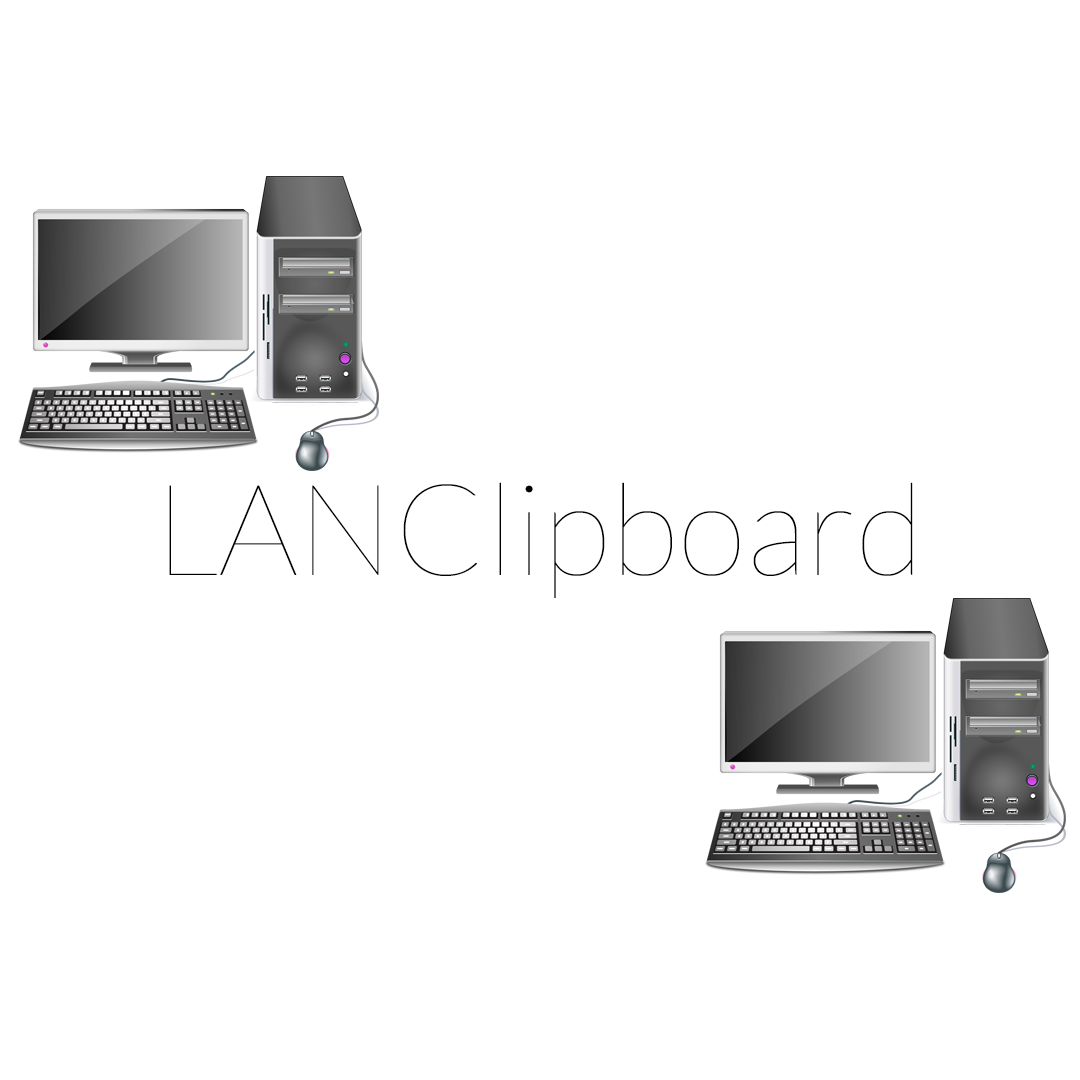
<style>
.page{position:relative;width:1080px;height:1080px;background:#ffffff}
.page>*{position:absolute;margin:0}
.t1{font:128px "Lato-Hairline";color:#000000}
</style>
<div class="page">
<p class="t1" style="left:169px;top:482px;width:744px;height:116px">LANClipboard</p>
</div>
